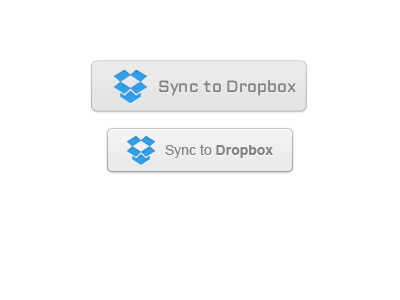
<style>
.page{position:relative;width:400px;height:300px;background:#ffffff}
.page>*{position:absolute;margin:0}
.t1{font:16.2px "Aldrich";color:#838383}
.t2{font:14px "ArialMT";color:#838383}
.t3{font:14px "Arial-BoldMT";color:#838383}
</style>
<div class="page">
<p class="t1" style="left:159px;top:80px;width:137px;height:16px">Sync to Dropbox</p>
<p class="t2" style="left:165px;top:144px;width:108px;height:14px">Sync to <span class="t3">Dropbox</span></p>
</div>
